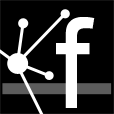
<style>
.page{position:relative;width:114px;height:114px;background:#000000}
.page>*{position:absolute;margin:0}
.t1{font:125.4px "ArialMT";color:#ffffff}
</style>
<div class="page">
<p class="t1" style="left:56px;top:17px;width:39px;height:91px">f</p>
</div>
